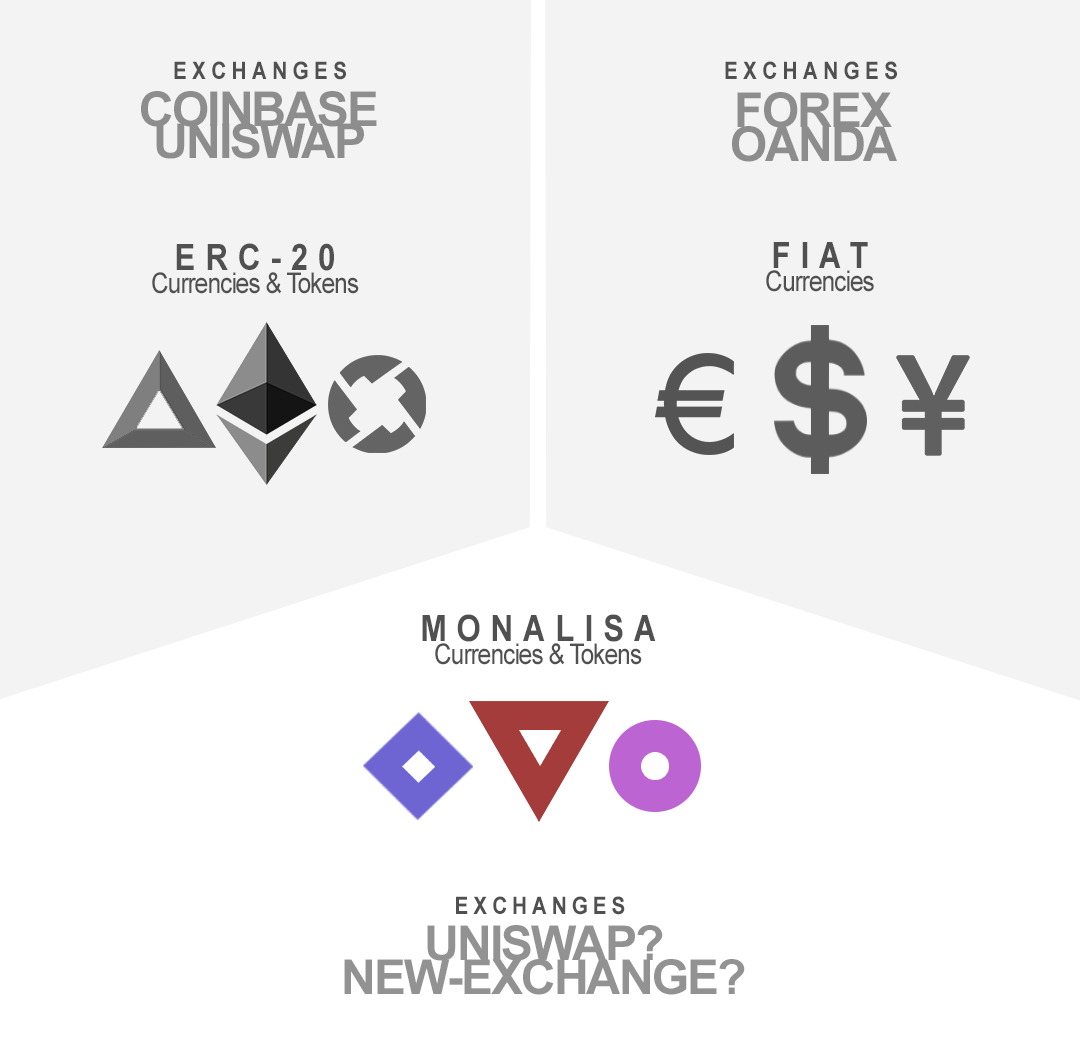
<style>
.page{position:relative;width:1080px;height:1056px;background:#f3f3f3}
.page>*{position:absolute;margin:0}
.t1{font:24px "Arial-BoldMT";letter-spacing:0.26em;color:#505050;scale:0.86 1}
.t2{font:48px/32px "Arial-BoldMT";letter-spacing:-0.04em;color:#8d8d8d}
.t3{font:48px/34px "Arial-BoldMT";letter-spacing:-0.04em;color:#8d8d8d}
.t4{font:28.5px/23.3px "ArialMT";letter-spacing:-0.04em;color:#505050;scale:0.86 1}
.t5{font:36.2px/23.3px "Arial-BoldMT";letter-spacing:0.32em;color:#505050;scale:0.86 1}
.t6{font:24px "Arial-BoldMT";letter-spacing:0.24em;color:#505050;scale:0.86 1}
.t7{font:48px/34px "Arial-BoldMT";letter-spacing:-0.04em;color:#929292}
</style>
<div class="page">
<p class="t1" style="left:174px;top:61px;width:172px;height:19px">EXCHANGES</p>
<p class="t1" style="left:725px;top:61px;width:172px;height:19px">EXCHANGES</p>
<p class="t2" style="left:141px;top:91px;width:236px;height:68px;text-align:center">COINBASE<br>UNISWAP</p>
<p class="t3" style="left:732px;top:92px;width:165px;height:70px;text-align:center">FOREX<br>OANDA</p>
<p class="t4" style="left:152px;top:243px;width:207px;height:51px;text-align:center"><span class="t5">ERC-20<br></span>Currencies &amp; Tokens</p>
<p class="t4" style="left:766px;top:242px;width:108px;height:50px;text-align:center"><span class="t5">FIAT<br></span>Currencies</p>
<p class="t4" style="left:422px;top:614px;width:234px;height:51px;text-align:center"><span class="t5">MONALISA<br></span>Currencies &amp; Tokens</p>
<p class="t6" style="left:456px;top:896px;width:169px;height:19px">EXCHANGES</p>
<p class="t7" style="left:344px;top:925px;width:401px;height:70px;text-align:center">UNISWAP?<br>NEW-EXCHANGE?</p>
</div>
